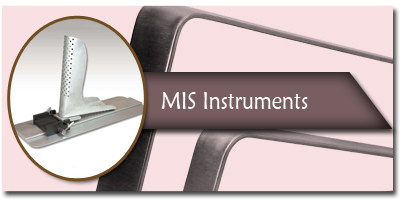
<style>
.page{position:relative;width:400px;height:200px;background:#f8e0e3}
.page>*{position:absolute;margin:0}
.t1{font:24px "MaiandraGD-Regular";color:#ffffff;scale:0.88 1}
</style>
<div class="page">
<p class="t1" style="left:161px;top:92px;width:147px;height:17px">MIS Instruments</p>
</div>
